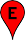
<style>
.page{position:relative;width:25px;height:40px;background:#ffffff}
.page>*{position:absolute;margin:0}
.t1{font:16.2px "NewsGothicMT-Bold";color:#000000}
</style>
<div class="page">
<p class="t1" style="left:8px;top:7px;width:9px;height:13px">E</p>
</div>
